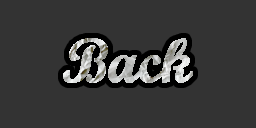
<style>
.page{position:relative;width:256px;height:128px;background:#333333}
.page>*{position:absolute;margin:0}
.t1{font:62.1px "ScriptMTBold";font-weight:bold;scale:0.93 1}
</style>
<div class="page">
<p class="t1" style="left:63px;top:38px;width:130px;height:45px">Back</p>
</div>
